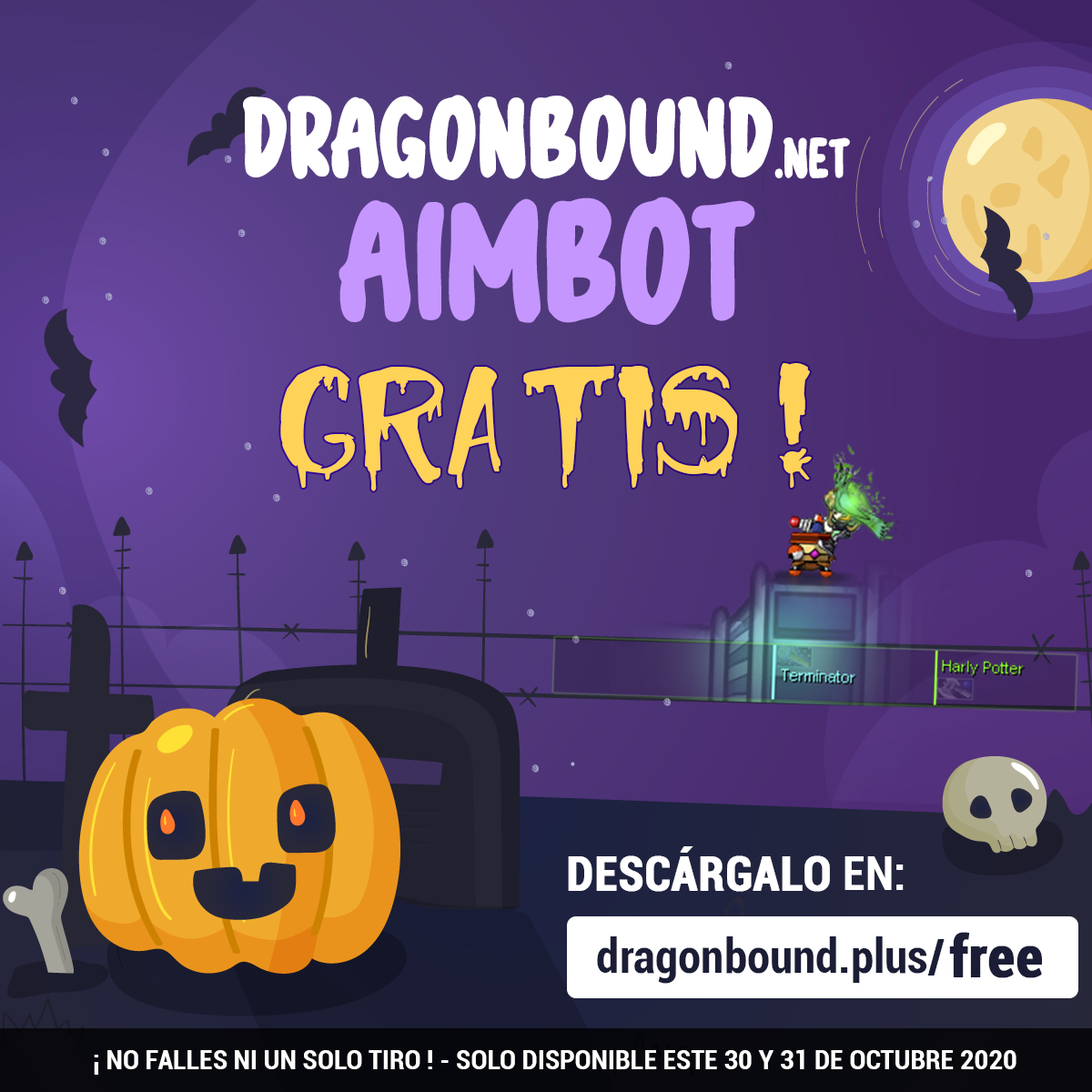
<style>
.page{position:relative;width:1092px;height:1092px}
.page>*{position:absolute;margin:0}
.t1{font:43.7px/143.8px "halloweenblack";color:#ffffff}
.t2{font:21.8px/143.8px "halloweenblack";color:#ffffff}
.t3{font:65.5px/143.8px "halloweenblack";color:#c696ff}
.t4{font:152.9px "HalloweenToo";color:#ffd258}
.t5{font:46.4px "Roboto-BoldCondensed";color:#ffffff;font-weight:bold}
.t6{font:46.4px "Roboto-BoldCondensed";color:#ffffff}
.t7{font:46.4px "Roboto-BoldCondensed";color:#1a1d35}
.t8{font:57.3px "Roboto-BoldCondensed";color:#1a1d35;font-weight:bold}
.t9{font:27.3px "Roboto-BoldCondensed";color:#ffffff}
</style>
<div class="page">
<p class="t1" style="left:243px;top:95px;width:607px;height:230px;text-align:center">DragonBound<span class="t2">.net<br></span><span class="t3">Aimbot</span></p>
<p class="t4" style="left:280px;top:363px;width:532px;height:128px">GRATIS !</p>
<p class="t5" style="left:568px;top:846px;width:336px;height:46px">DESCÁRGALO <span class="t6">EN:</span></p>
<p class="t7" style="left:597px;top:936px;width:348px;height:48px">dragonbound.plus/</p>
<p class="t8" style="left:949px;top:932px;width:93px;height:46px">free</p>
<p class="t9" style="left:94px;top:1049px;width:922px;height:26px">¡ NO FALLES NI UN SOLO TIRO ! - SOLO DISPONIBLE ESTE 30 Y 31 DE OCTUBRE 2020</p>
</div>
